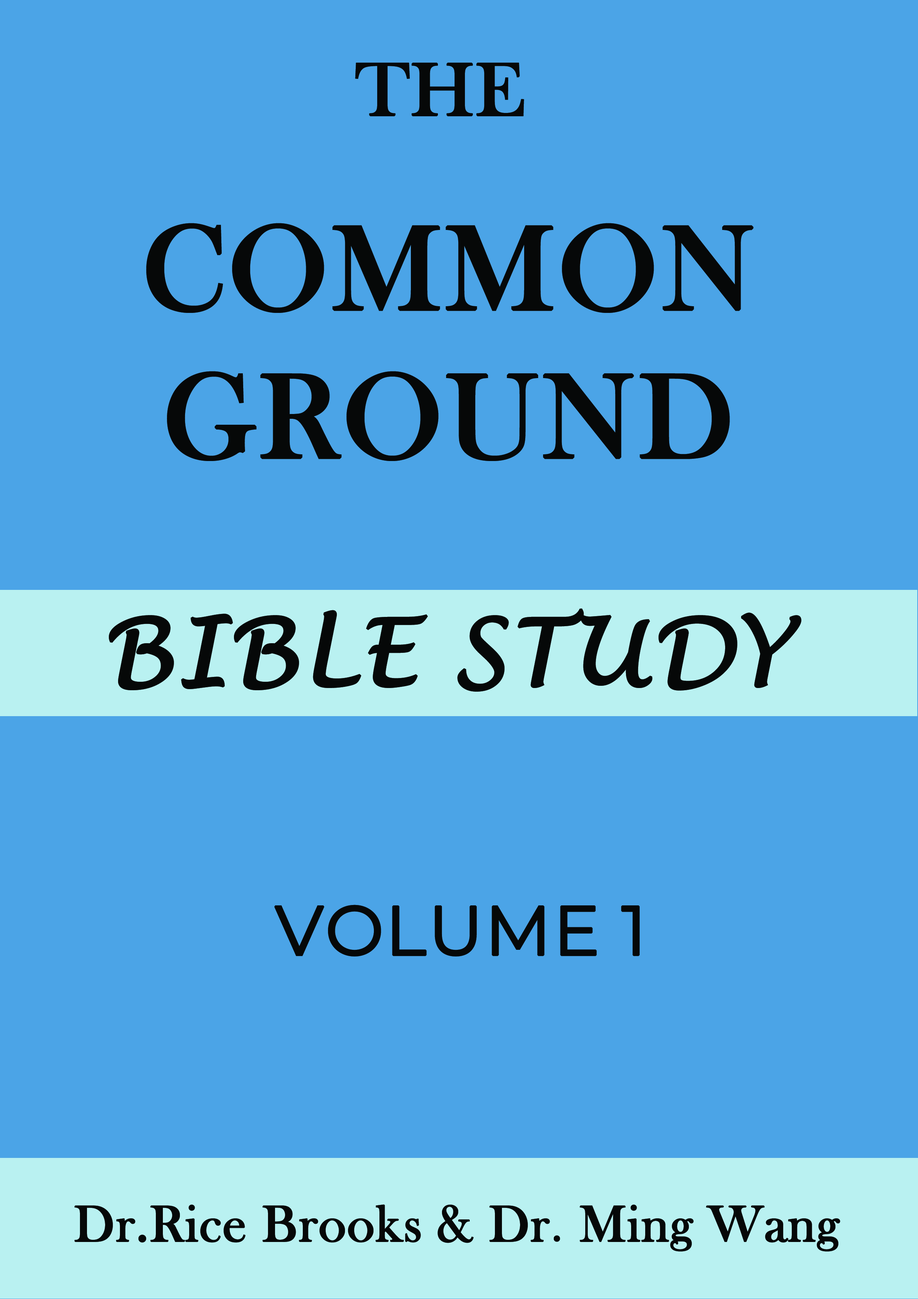
<style>
.page{position:relative;width:918px;height:1299px;background:#4ba4e7}
.page>*{position:absolute;margin:0}
.t1{font:77.1px "BaskOldFace";color:#060808;font-weight:bold}
.t2{font:123.4px "BaskOldFace";color:#060808;font-weight:bold}
.t3{font:92.6px "LucidaHandwriting-Italic";color:#060808;font-weight:bold}
.t4{font:69.4px "Montserrat-Regular";color:#060808;font-weight:bold}
.t5{font:52.4px "BaskOldFace";color:#060808;font-weight:bold}
</style>
<div class="page">
<p class="t1" style="left:355px;top:63px;width:169px;height:53px">THE</p>
<p class="t2" style="left:146px;top:223px;width:608px;height:238px;text-align:center">COMMON<br>GROUND</p>
<p class="t3" style="left:109px;top:608px;width:693px;height:84px">BIBLE STUDY</p>
<p class="t4" style="left:274px;top:904px;width:366px;height:52px">VOLUME 1</p>
<p class="t5" style="left:74px;top:1204px;width:766px;height:47px">Dr.Rice Brooks &amp; Dr. Ming Wang</p>
</div>
